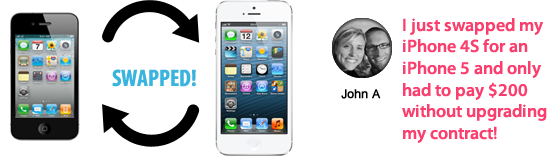
<style>
.page{position:relative;width:547px;height:156px;background:#ffffff}
.page>*{position:absolute;margin:0}
.t1{font:18px/21.6px "MyriadPro-Semibold";color:#fa3e6e}
.t2{font:24px "MyriadPro-BoldCond";color:#38b4de}
.t3{font:12px "ArialMT";color:#000000;font-weight:bold}
</style>
<div class="page">
<p class="t1" style="left:402px;top:18px;width:145px;height:125px">I just swapped my iPhone 4S for an iPhone 5 and only had to pay $200 without upgrading my contract!</p>
<p class="t2" style="left:112px;top:69px;width:84px;height:18px">SWAPPED!</p>
<p class="t3" style="left:341px;top:89px;width:40px;height:10px">John A</p>
</div>
